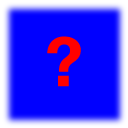
<style>
.page{position:relative;width:128px;height:128px;background:#0000ff}
.page>*{position:absolute;margin:0}
.t1{font:68px "HelveticaNeue-Bold";letter-spacing:-0.04em;color:#ff0000}
</style>
<div class="page">
<p class="t1" style="left:47px;top:36px;width:34px;height:51px">?</p>
</div>
